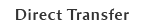
<style>
.page{position:relative;width:144px;height:28px;background:#ffffff}
.page>*{position:absolute;margin:0}
.t1{font:16px "AmiraParadiso";letter-spacing:0.05em;color:#333333}
</style>
<div class="page">
<p class="t1" style="left:16px;top:8px;width:113px;height:12px">Direct Transfer</p>
</div>
